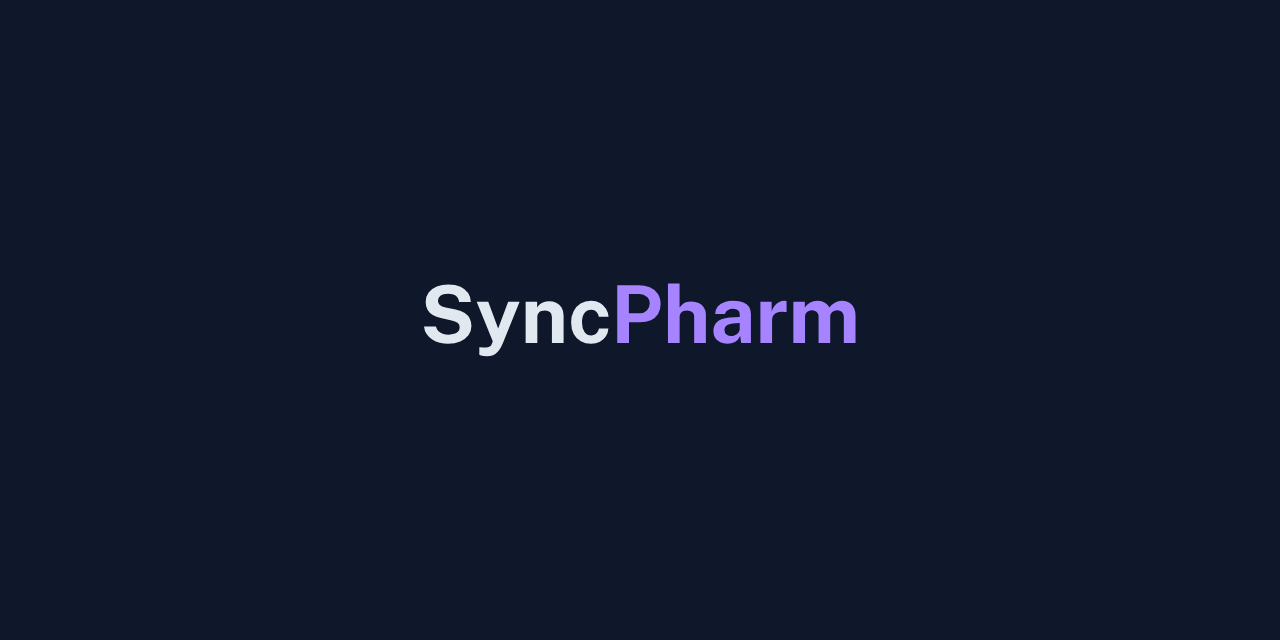
<style>
.page{position:relative;width:1280px;height:640px;background:#0f172b}
.page>*{position:absolute;margin:0}
.t1{font:80px "PublicSans-Bold";color:#a684ff}
.t2{font:80px "PublicSans-Bold";color:#e2e8f0}
</style>
<div class="page">
<p class="t1" style="left:424px;top:283px;width:432px;height:74px"><span class="t2">Sync</span>Pharm</p>
</div>
